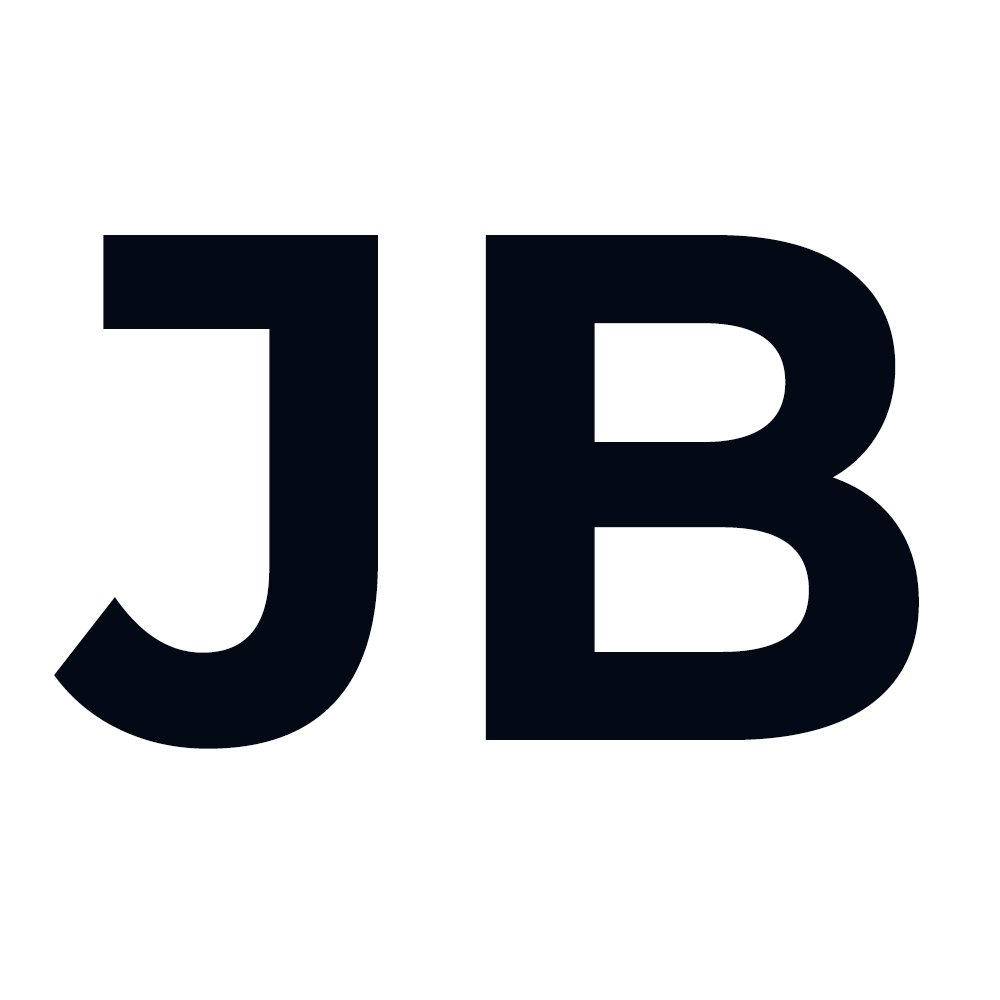
<style>
.page{position:relative;width:1000px;height:1000px;background:#ffffff}
.page>*{position:absolute;margin:0}
.t1{font:721.3px "Montserrat-Bold";color:#040916;scale:0.93 1}
</style>
<div class="page">
<p class="t1" style="left:54px;top:235px;width:865px;height:514px">JB</p>
</div>
